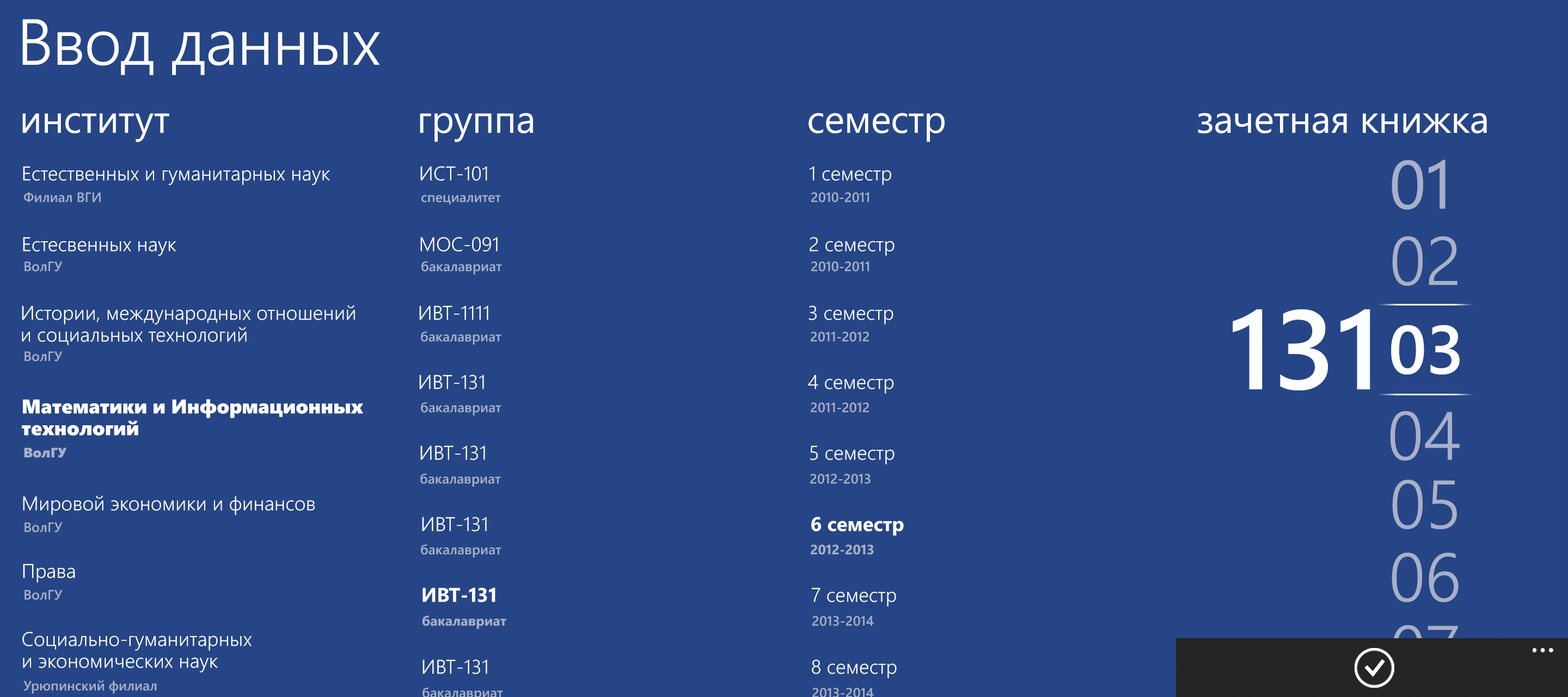
<style>
.page{position:relative;width:1568px;height:697px;background:#254586}
.page>*{position:absolute;margin:0}
.t1{font:64.8px "SegoeWP-SemiLight";letter-spacing:-0.01em;color:#ffffff}
.t2{font:38.7px "SegoeWP";letter-spacing:-0.01em;color:#ffffff}
.t3{font:68.2px "SegoeWP";color:#a7b0c8}
.t4{font:19.8px "SegoeWP-SemiLight";color:#ffffff}
.t5{font:13.6px "SegoeWP-Semibold";color:#a7b0c8}
.t6{font:68.2px "SegoeWP-SemiLight";color:#a7b0c8}
.t7{font:19.8px/21.8px "SegoeWP-SemiLight";color:#ffffff}
.t8{font:112.7px "SegoeUI-Semibold";color:#ffffff}
.t9{font:68.2px "SegoeWP-Semibold";color:#ffffff}
.t10{font:19.8px/21.8px "SegoeWP-Black";color:#ffffff}
.t11{font:13.6px "SegoeWP-Black";color:#a7b0c8}
.t12{font:19.8px "SegoeWP-Bold";color:#ffffff}
.t13{font:13.6px "SegoeWP-Bold";color:#a7b0c8}
.t14{font:68.2px "SegoeWP-SemiLight"}
</style>
<div class="page">
<p class="t1" style="left:22px;top:19px;width:358px;height:56px">Ввод данных</p>
<p class="t2" style="left:22px;top:113px;width:147px;height:29px">институт</p>
<p class="t2" style="left:420px;top:113px;width:113px;height:29px">группа</p>
<p class="t2" style="left:808px;top:113px;width:137px;height:29px">семестр</p>
<p class="t2" style="left:1198px;top:113px;width:289px;height:20px">зачетная книжка</p>
<p class="t3" style="left:1392px;top:160px;width:53px;height:50px">01</p>
<p class="t4" style="left:23px;top:166px;width:307px;height:19px">Естественных и гуманитарных наук</p>
<p class="t4" style="left:420px;top:166px;width:67px;height:15px">ИСТ-101</p>
<p class="t4" style="left:810px;top:166px;width:81px;height:19px">1 семестр</p>
<p class="t5" style="left:24px;top:192px;width:77px;height:11px">Филиал ВГИ</p>
<p class="t5" style="left:421px;top:195px;width:80px;height:10px">специалитет</p>
<p class="t5" style="left:811px;top:192px;width:58px;height:11px">2010-2011</p>
<p class="t4" style="left:23px;top:237px;width:153px;height:19px">Естесвенных наук</p>
<p class="t4" style="left:420px;top:237px;width:78px;height:15px">МОС-091</p>
<p class="t4" style="left:810px;top:237px;width:85px;height:19px">2 семестр</p>
<p class="t6" style="left:1392px;top:236px;width:65px;height:50px">02</p>
<p class="t5" style="left:24px;top:261px;width:39px;height:11px">ВолГУ</p>
<p class="t5" style="left:421px;top:261px;width:81px;height:13px">бакалавриат</p>
<p class="t5" style="left:811px;top:261px;width:58px;height:11px">2010-2011</p>
<p class="t7" style="left:22px;top:305px;width:333px;height:40px">Истории, международных отношений <br>и социальных технологий</p>
<p class="t4" style="left:419px;top:305px;width:69px;height:15px">ИВТ-1111</p>
<p class="t4" style="left:808px;top:305px;width:85px;height:19px">3 семестр</p>
<p class="t8" style="left:1233px;top:309px;width:137px;height:81px">131</p>
<p class="t9" style="left:1391px;top:325px;width:69px;height:50px">03</p>
<p class="t5" style="left:421px;top:331px;width:80px;height:14px">бакалавриат</p>
<p class="t5" style="left:811px;top:332px;width:58px;height:10px">2011-2012</p>
<p class="t5" style="left:24px;top:351px;width:39px;height:11px">ВолГУ</p>
<p class="t4" style="left:419px;top:375px;width:65px;height:14px">ИВТ-131</p>
<p class="t4" style="left:808px;top:375px;width:86px;height:19px">4 семестр</p>
<p class="t10" style="left:22px;top:399px;width:341px;height:37px">Математики и Информационных <br>технологий</p>
<p class="t5" style="left:421px;top:402px;width:80px;height:13px">бакалавриат</p>
<p class="t5" style="left:811px;top:402px;width:58px;height:11px">2011-2012</p>
<p class="t6" style="left:1390px;top:411px;width:70px;height:50px">04</p>
<p class="t11" style="left:24px;top:448px;width:43px;height:10px">ВолГУ</p>
<p class="t4" style="left:420px;top:445px;width:65px;height:15px">ИВТ-131</p>
<p class="t4" style="left:810px;top:445px;width:85px;height:19px">5 семестр</p>
<p class="t5" style="left:420px;top:473px;width:81px;height:14px">бакалавриат</p>
<p class="t5" style="left:810px;top:474px;width:61px;height:10px">2012-2013</p>
<p class="t6" style="left:1392px;top:480px;width:65px;height:49px">05</p>
<p class="t4" style="left:23px;top:495px;width:292px;height:20px">Мировой экономики и финансов</p>
<p class="t4" style="left:422px;top:517px;width:65px;height:14px">ИВТ-131</p>
<p class="t12" style="left:811px;top:517px;width:93px;height:19px">6 семестр</p>
<p class="t5" style="left:24px;top:522px;width:39px;height:10px">ВолГУ</p>
<p class="t5" style="left:421px;top:544px;width:80px;height:14px">бакалавриат</p>
<p class="t13" style="left:811px;top:544px;width:63px;height:11px">2012-2013</p>
<p class="t6" style="left:1392px;top:553px;width:67px;height:49px">06</p>
<p class="t4" style="left:23px;top:564px;width:52px;height:19px">Права</p>
<p class="t5" style="left:24px;top:590px;width:39px;height:10px">ВолГУ</p>
<p class="t12" style="left:422px;top:587px;width:73px;height:15px">ИВТ-131</p>
<p class="t4" style="left:811px;top:587px;width:85px;height:20px">7 семестр</p>
<p class="t13" style="left:422px;top:615px;width:84px;height:14px">бакалавриат</p>
<p class="t5" style="left:812px;top:616px;width:62px;height:10px">2013-2014</p>
<p class="t14" style="left:1392px;top:625px;width:66px;height:50px">07</p>
<p class="t7" style="left:22px;top:632px;width:230px;height:40px">Социально-гуманитарных <br>и экономических наук</p>
<p class="t4" style="left:422px;top:659px;width:65px;height:15px">ИВТ-131</p>
<p class="t4" style="left:812px;top:659px;width:85px;height:19px">8 семестр</p>
<p class="t5" style="left:23px;top:680px;width:134px;height:14px">Урюпинский филиал</p>
<p class="t5" style="left:812px;top:688px;width:62px;height:10px">2013-2014</p>
</div>
